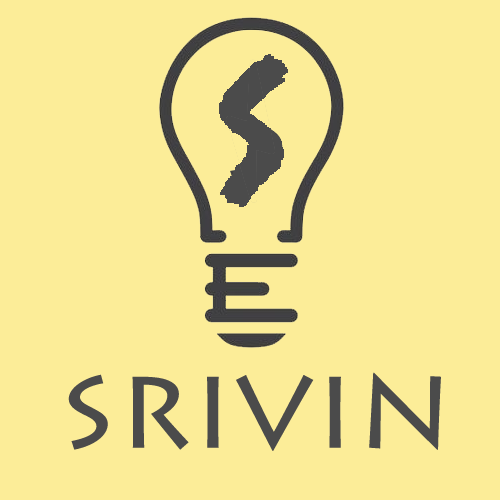
<style>
.page{position:relative;width:500px;height:500px;background:#fced98}
.page>*{position:absolute;margin:0}
.t1{font:119px "LithosPro-Regular";letter-spacing:0.01em;color:#4b4b4b}
</style>
<div class="page">
<p class="t1" style="left:68px;top:372px;width:373px;height:79px">srivin</p>
</div>
